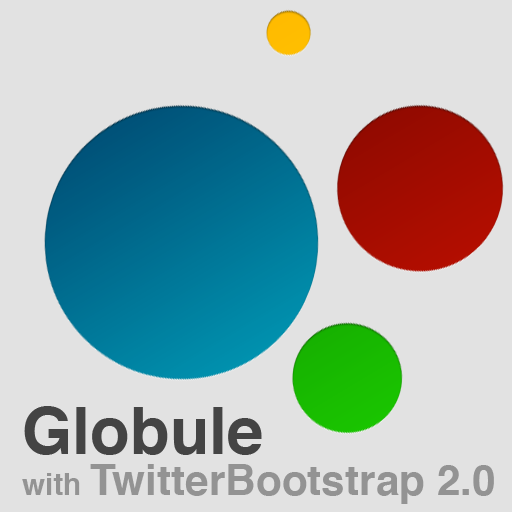
<style>
.page{position:relative;width:512px;height:512px;background:#e2e2e2}
.page>*{position:absolute;margin:0}
.t1{font:42.3px/40.6px "Helvetica-Bold";color:#939393}
.t2{font:64.8px/40.6px "Helvetica-Bold";color:#444444}
.t3{font:29.7px/40.6px "Helvetica-Bold";color:#939393}
</style>
<div class="page">
<p class="t1" style="left:22px;top:406px;width:472px;height:98px"><span class="t2">Globule<br></span><span class="t3">with </span>TwitterBootstrap 2.0</p>
</div>
